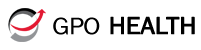
<style>
.page{position:relative;width:201px;height:50px;background:#ffffff}
.page>*{position:absolute;margin:0}
.t1{font:24.9px "FranklinGothic-Book";letter-spacing:-0.025em;color:#000000;scale:1.07 1}
.t2{font:24.9px "FranklinGothic-Book";letter-spacing:-0.025em;color:#000000;font-weight:bold;scale:1.07 1}
</style>
<div class="page">
<p class="t1" style="left:53px;top:17px;width:47px;height:18px">GPO</p>
<p class="t2" style="left:110px;top:16px;width:85px;height:19px">HEALTH</p>
</div>
